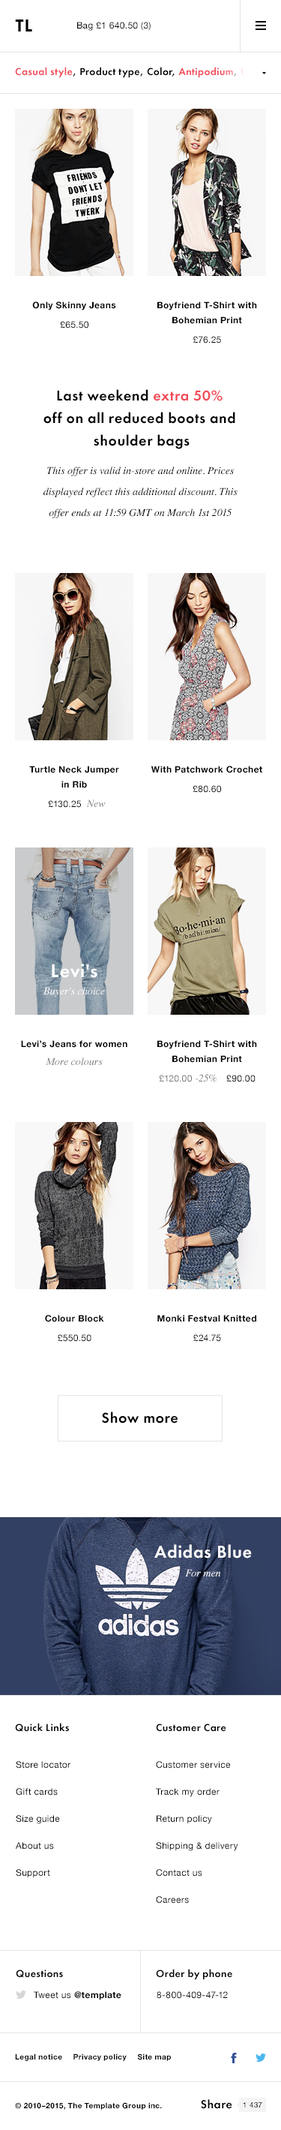
<style>
.page{position:relative;width:281px;height:2130px;background:#ffffff}
.page>*{position:absolute;margin:0}
.t1{font:18px "FuturaPT-Heavy";letter-spacing:0.03em;color:#000000;text-transform:uppercase}
.t2{font:9px "HelveticaNeue";letter-spacing:0.03em;color:#000000}
.t3{font:10.5px "FuturaPT-Demi";letter-spacing:0.03em;color:#000000}
.t4{font:10.5px "FuturaPT-Demi";letter-spacing:0.03em;color:#f14a58}
.t5{font:9px "HelveticaNeue-Bold";letter-spacing:0.03em;color:#000000}
.t6{font:9px/15px "HelveticaNeue-Bold";letter-spacing:0.03em;color:#000000}
.t7{font:15px/22.5px "FuturaPT-Demi";letter-spacing:0.03em;color:#000000}
.t8{font:15px/22.5px "FuturaPT-Demi";letter-spacing:0.03em;color:#f14a58}
.t9{font:10.5px/21px "Times-Italic";color:#000000}
.t10{font:10.5px "Times-Italic";color:#757575}
.t11{font:19.5px "FuturaPT-Demi";letter-spacing:0.03em;color:#ffffff}
.t12{font:10.5px "Times-Italic";color:#ffffff}
.t13{font:9px "HelveticaNeue";letter-spacing:0.03em;color:#757575}
.t14{font:15px "FuturaPT-Demi";letter-spacing:0.03em;color:#000000}
.t15{font:18px "FuturaPT-Demi";letter-spacing:0.03em;color:#ffffff}
.t16{font:9px/27px "HelveticaNeue";letter-spacing:0.03em;color:#000000}
.t17{font:7.5px "HelveticaNeue-Bold";letter-spacing:0.03em;color:#000000}
.t18{font:12px "FuturaPT-Demi";letter-spacing:0.03em;color:#000000}
.t19{font:7.5px "HelveticaNeue";letter-spacing:0.03em;color:#000000}
</style>
<div class="page">
<p class="t1" style="left:15px;top:20px;width:17px;height:12px">tl</p>
<p class="t2" style="left:77px;top:22px;width:74px;height:9px">Bag £1 640.50 (3)</p>
<p class="t3" style="left:15px;top:67px;width:240px;height:11px"><span class="t4">Casual style</span>, Product type, Color, <span class="t4">Antipodium</span>, <span class="t4">UK</span></p>
<p class="t5" style="left:32px;top:302px;width:84px;height:8px">Only Skinny Jeans</p>
<p class="t6" style="left:158px;top:302px;width:99px;height:22px;text-align:center">Boyfriend T-Shirt with<br>Bohemian Print</p>
<p class="t2" style="left:60px;top:321px;width:28px;height:7px">£65.50</p>
<p class="t2" style="left:194px;top:336px;width:27px;height:8px">£76.25</p>
<p class="t7" style="left:44px;top:389px;width:192px;height:60px;text-align:center">Last weekend <span class="t8">extra 50%</span> <br>off on all reduced boots and <br>shoulder bags</p>
<p class="t9" style="left:44px;top:466px;width:194px;height:52px;text-align:center">This offer is valid in-store and online. Prices displayed reflect this additional discount. This offer ends at 11:59 GMT on March 1st 2015</p>
<p class="t6" style="left:29px;top:766px;width:90px;height:22px;text-align:center">Turtle Neck Jumper<br>in Rib</p>
<p class="t5" style="left:151px;top:766px;width:111px;height:7px">With Patchwork Crochet</p>
<p class="t2" style="left:193px;top:785px;width:28px;height:8px">£80.60</p>
<p class="t2" style="left:48px;top:800px;width:33px;height:8px">£130.25</p>
<p class="t10" style="left:86px;top:800px;width:20px;height:7px">New</p>
<p class="t11" style="left:52px;top:964px;width:46px;height:14px">Levi's</p>
<p class="t12" style="left:44px;top:987px;width:61px;height:10px">Buyer's choice</p>
<p class="t5" style="left:21px;top:1040px;width:107px;height:8px">Levi’s Jeans for women</p>
<p class="t6" style="left:158px;top:1040px;width:99px;height:23px;text-align:center">Boyfriend T-Shirt with<br>Bohemian Print</p>
<p class="t10" style="left:46px;top:1058px;width:57px;height:7px">More colours</p>
<p class="t13" style="left:159px;top:1075px;width:33px;height:7px">£120.00</p>
<p class="t10" style="left:196px;top:1074px;width:21px;height:8px">-25%</p>
<p class="t2" style="left:226px;top:1075px;width:30px;height:7px">£90.00</p>
<p class="t5" style="left:45px;top:1315px;width:59px;height:7px">Colour Block</p>
<p class="t5" style="left:158px;top:1315px;width:98px;height:7px">Monki Festval Knitted</p>
<p class="t2" style="left:58px;top:1334px;width:34px;height:8px">£550.50</p>
<p class="t2" style="left:194px;top:1334px;width:27px;height:8px">£24.75</p>
<p class="t14" style="left:102px;top:1412px;width:76px;height:12px">Show more</p>
<p class="t15" style="left:154px;top:1544px;width:98px;height:14px">Adidas Blue</p>
<p class="t12" style="left:185px;top:1569px;width:36px;height:7px">For men</p>
<p class="t3" style="left:15px;top:1723px;width:54px;height:9px">Quick Links</p>
<p class="t3" style="left:156px;top:1724px;width:70px;height:8px">Customer Care</p>
<p class="t16" style="left:16px;top:1761px;width:54px;height:117px">Store locator<br>Gift cards<br>Size guide<br>About us<br>Support</p>
<p class="t16" style="left:156px;top:1761px;width:82px;height:143px">Customer service<br>Track my order<br>Return policy<br>Shipping &amp; delivery<br>Contact us<br>Careers</p>
<p class="t3" style="left:16px;top:1970px;width:47px;height:8px">Questions</p>
<p class="t3" style="left:156px;top:1969px;width:76px;height:11px">Order by phone</p>
<p class="t5" style="left:34px;top:1991px;width:88px;height:9px"><span class="t2">Tweet us </span>@template</p>
<p class="t2" style="left:157px;top:1991px;width:71px;height:8px">8-800-409-47-12</p>
<p class="t17" style="left:15px;top:2054px;width:156px;height:7px">Legal notice     Privacy policy     Site map</p>
<p class="t17" style="left:15px;top:2102px;width:147px;height:8px">© 2010–2015, The Template Group inc.</p>
<p class="t18" style="left:201px;top:2099px;width:31px;height:10px">Share</p>
<p class="t19" style="left:243px;top:2102px;width:19px;height:6px">1 437</p>
</div>
